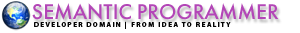
<style>
.page{position:relative;width:300px;height:33px;background:#ffffff}
.page>*{position:absolute;margin:0}
.t1{font:21px "FuturaFuturisC";color:#b346b7;text-transform:uppercase}
.t2{font:7px "MyriadPro-Bold";letter-spacing:0.2em;color:#040404;text-transform:uppercase}
</style>
<div class="page">
<p class="t1" style="left:32px;top:3px;width:247px;height:17px">SEMANTIC PROGRAMMER</p>
<p class="t2" style="left:34px;top:21px;width:197px;height:8px">DEVELOPER DOMAIN | FROM IDEA TO REALITY</p>
</div>
